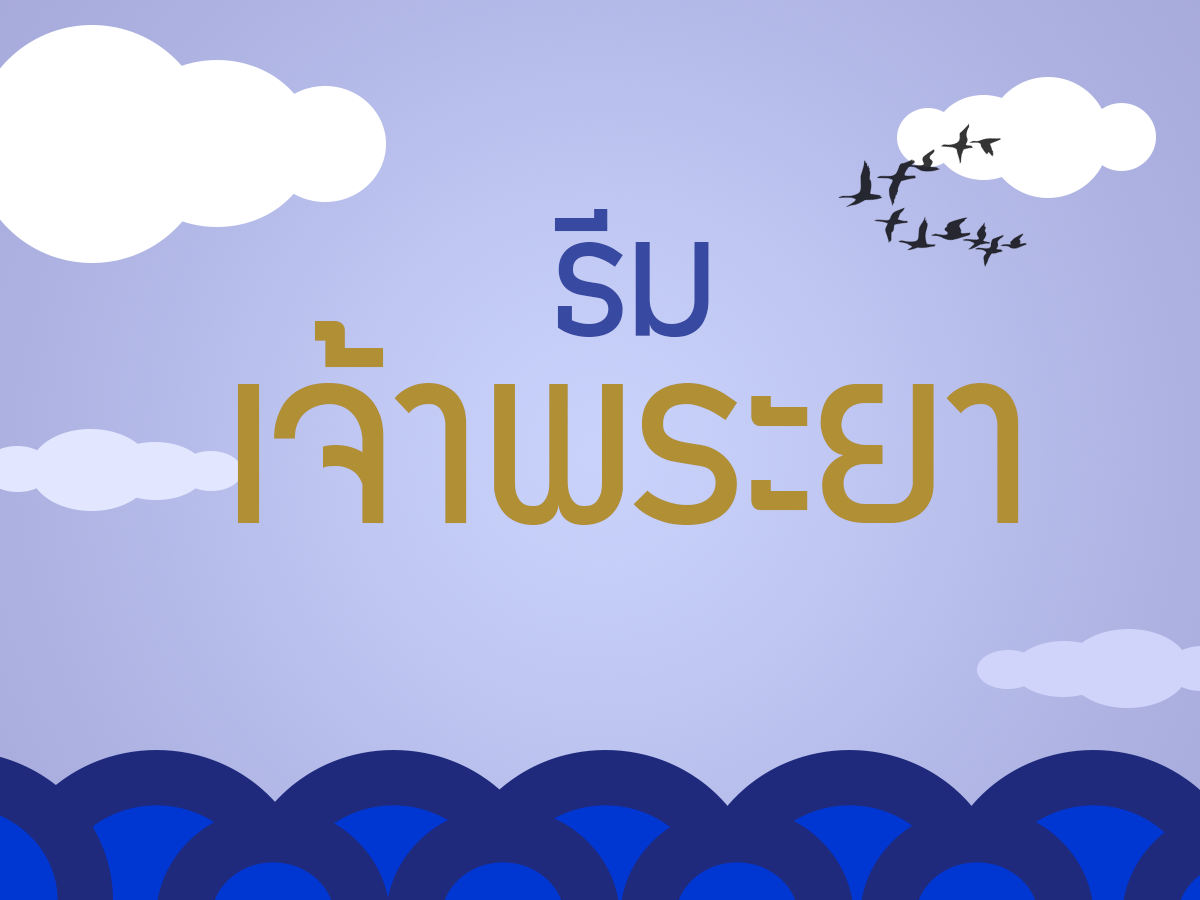
<style>
.page{position:relative;width:1200px;height:900px}
.page>*{position:absolute;margin:0}
.t1{font:178.8px "supermarket";color:#3849a1}
.t2{font:265.5px "supermarket";color:#b08f35}
</style>
<div class="page">
<p class="t1" style="left:554px;top:209px;width:155px;height:128px">ธีม</p>
<p class="t2" style="left:237px;top:321px;width:782px;height:204px">เจ้าพระยา</p>
</div>
